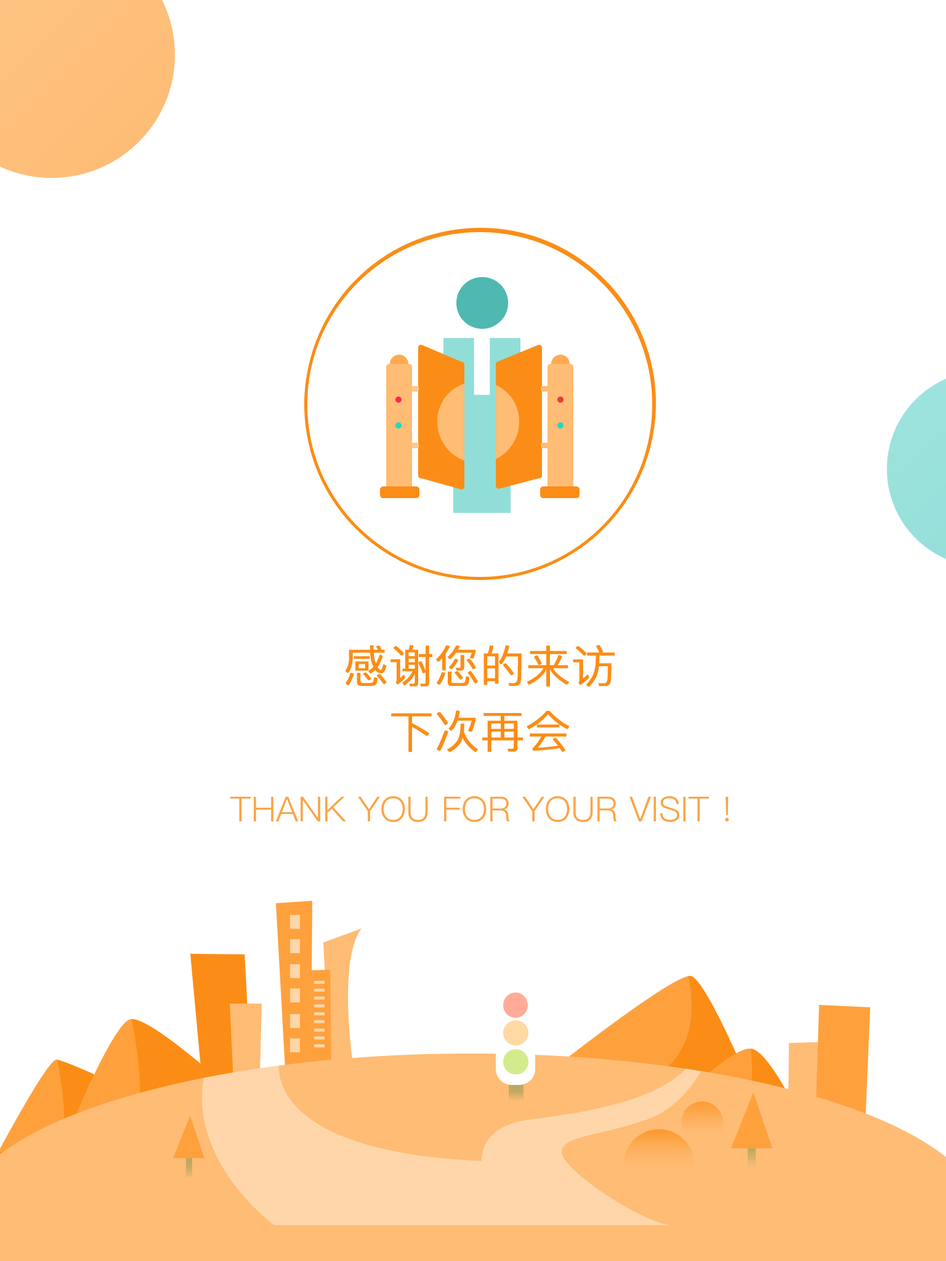
<style>
.page{position:relative;width:946px;height:1261px;background:#ffffff}
.page>*{position:absolute;margin:0}
.t1{font:44.3px "PingFang-SC-Regular";color:#fb8d16;font-weight:bold}
.t2{font:34.5px "PingFang-SC-Regular";color:#fca445;text-transform:uppercase}
</style>
<div class="page">
<p class="t1" style="left:345px;top:645px;width:269px;height:42px">感谢您的来访</p>
<p class="t1" style="left:391px;top:710px;width:179px;height:42px">下次再会</p>
<p class="t2" style="left:230px;top:796px;width:499px;height:26px">Thank you for your visit !</p>
</div>
